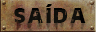
<style>
.page{position:relative;width:96px;height:32px}
.page>*{position:absolute;margin:0}
.t1{font:10px "CartesDisplaySSK";letter-spacing:0.08em;color:#000000;text-transform:uppercase;font-style:italic;scale:2.6 1}
.t2{font:21px "CartesDisplaySSK";letter-spacing:0.08em;color:#000000;text-transform:uppercase;scale:1.06 1}
</style>
<div class="page">
<p class="t1" style="left:46px;top:4px;width:6px;height:3px">,</p>
<p class="t2" style="left:14px;top:8px;width:72px;height:15px">SAIDA</p>
</div>
